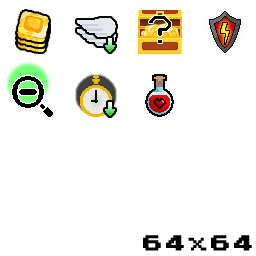
<style>
.page{position:relative;width:256px;height:256px;background:#ffffff}
.page>*{position:absolute;margin:0}
.t1{font:25px "PokemonGSC";color:#000000;font-weight:bold}
</style>
<div class="page">
<p class="t1" style="left:143px;top:235px;width:109px;height:16px">64x64</p>
</div>
